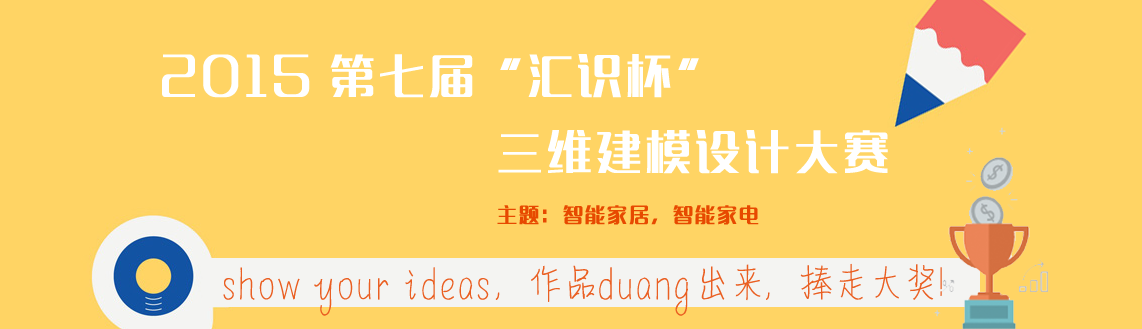
<style>
.page{position:relative;width:1142px;height:329px;background:#ffd464}
.page>*{position:absolute;margin:0}
.t1{font:45px "MFLangQian_Noncommercial-Regular";letter-spacing:0.1em;color:#ffffff}
.t2{font:20px "MFLangQian_Noncommercial-Regular";letter-spacing:0.1em;color:#e74900}
.t3{font:37px "MFQingShu_Noncommercial-Regular";letter-spacing:0.1em;color:#ea5f22}
</style>
<div class="page">
<p class="t1" style="left:162px;top:54px;width:537px;height:44px">2015 第七届“汇识杯”</p>
<p class="t1" style="left:498px;top:130px;width:390px;height:44px">三维建模设计大赛</p>
<p class="t2" style="left:497px;top:205px;width:262px;height:20px">主题：智能家居，智能家电</p>
<p class="t3" style="left:223px;top:263px;width:719px;height:53px">show your ideas，作品duang出来，捧走大奖!</p>
</div>
